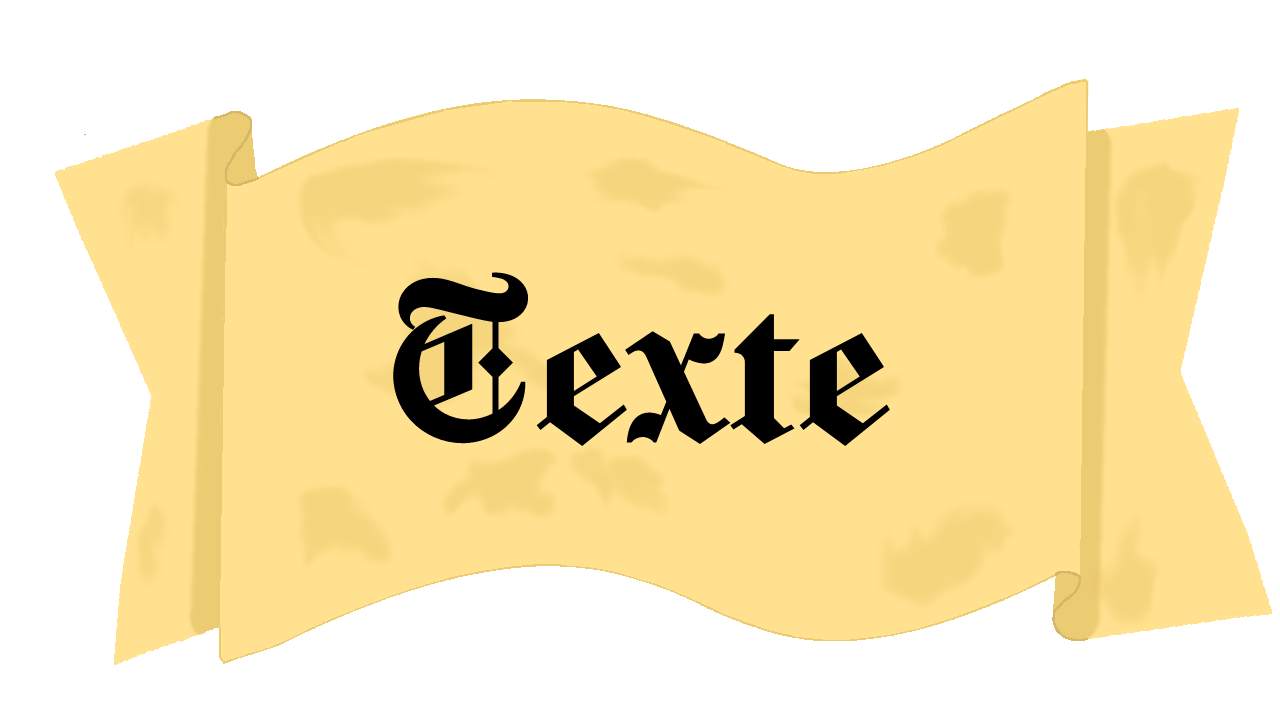
<style>
.page{position:relative;width:1280px;height:720px;background:#ffffff}
.page>*{position:absolute;margin:0}
.t1{font:216.6px "Chomsky";color:#000000}
</style>
<div class="page">
<p class="t1" style="left:390px;top:272px;width:500px;height:175px">Texte</p>
</div>
